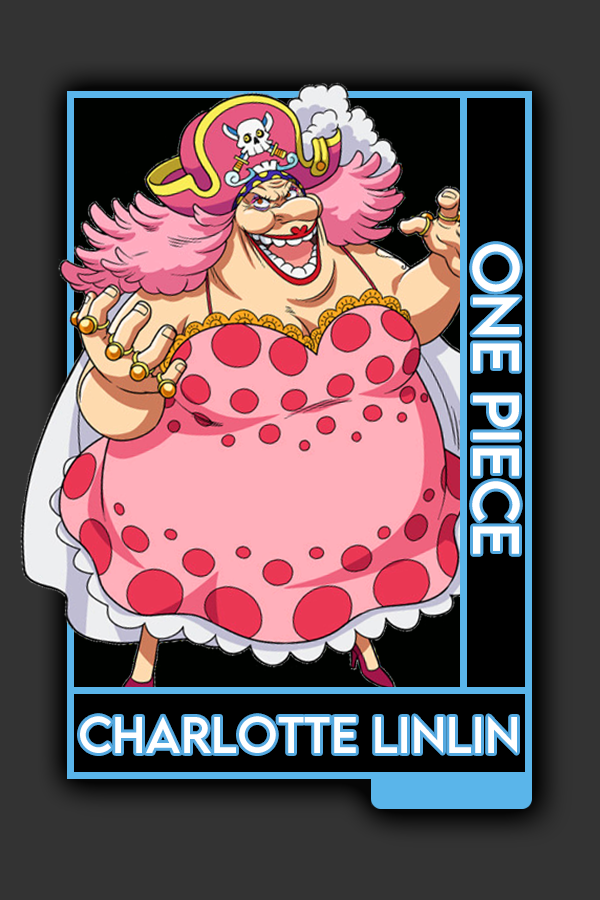
<style>
.page{position:relative;width:600px;height:900px;background:#333333}
.page>*{position:absolute;margin:0}
.t1{font:58.4px "LEMONMILK-Regular";color:#ffffff}
.t2{font:45.6px "LEMONMILK-Regular";color:#ffffff}
</style>
<div class="page">
<p class="t1" style="left:472px;top:244px;width:48px;height:310px;rotate:90deg">One Piece</p>
<p class="t2" style="left:80px;top:716px;width:437px;height:37px">Charlotte Linlin</p>
</div>
